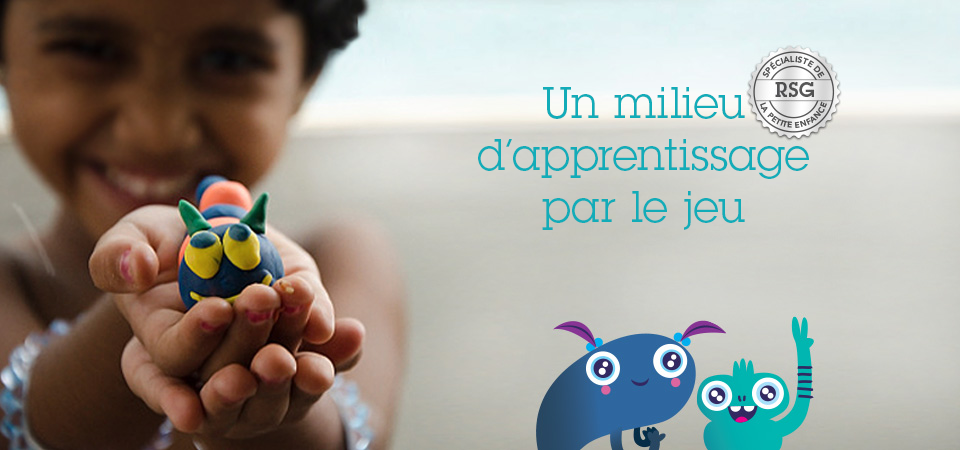
<style>
.page{position:relative;width:960px;height:450px}
.page>*{position:absolute;margin:0}
.t1{font:43px/52px "LubalinGraphStd-Book";letter-spacing:0.025em;color:#12acb8}
</style>
<div class="page">
<p class="t1" style="left:478px;top:87px;width:331px;height:143px;text-align:center">Un milieu<br>d’apprentissage<br>par le jeu</p>
</div>
